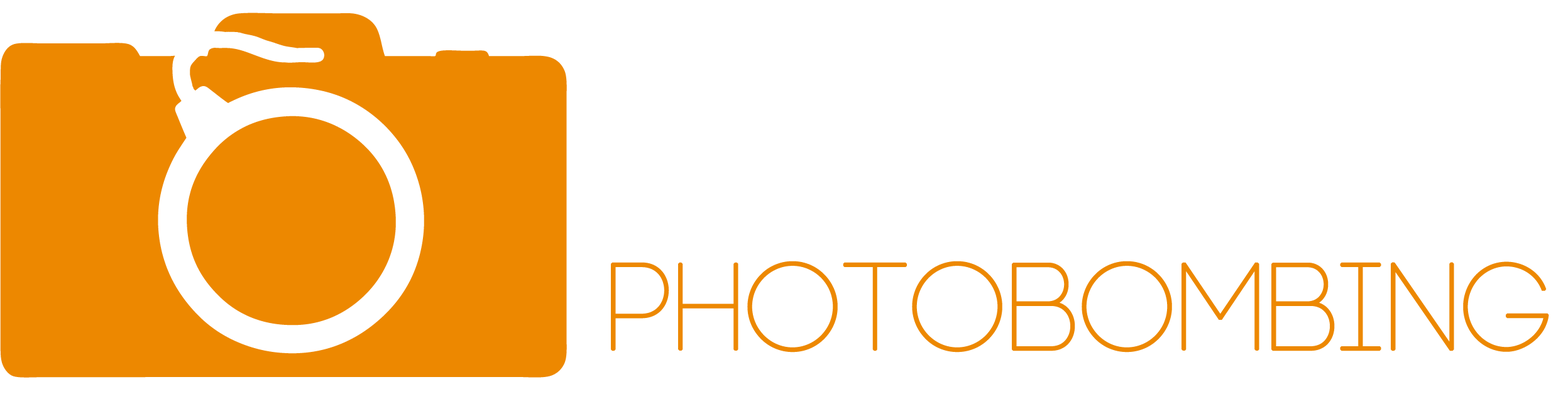
<style>
.page{position:relative;width:1568px;height:394px;background:#ffffff}
.page>*{position:absolute;margin:0}
.t1{font:122.3px "Code-Light";color:#ed8800;font-weight:bold}
</style>
<div class="page">
<p class="t1" style="left:611px;top:261px;width:938px;height:92px">Photobombing</p>
</div>
